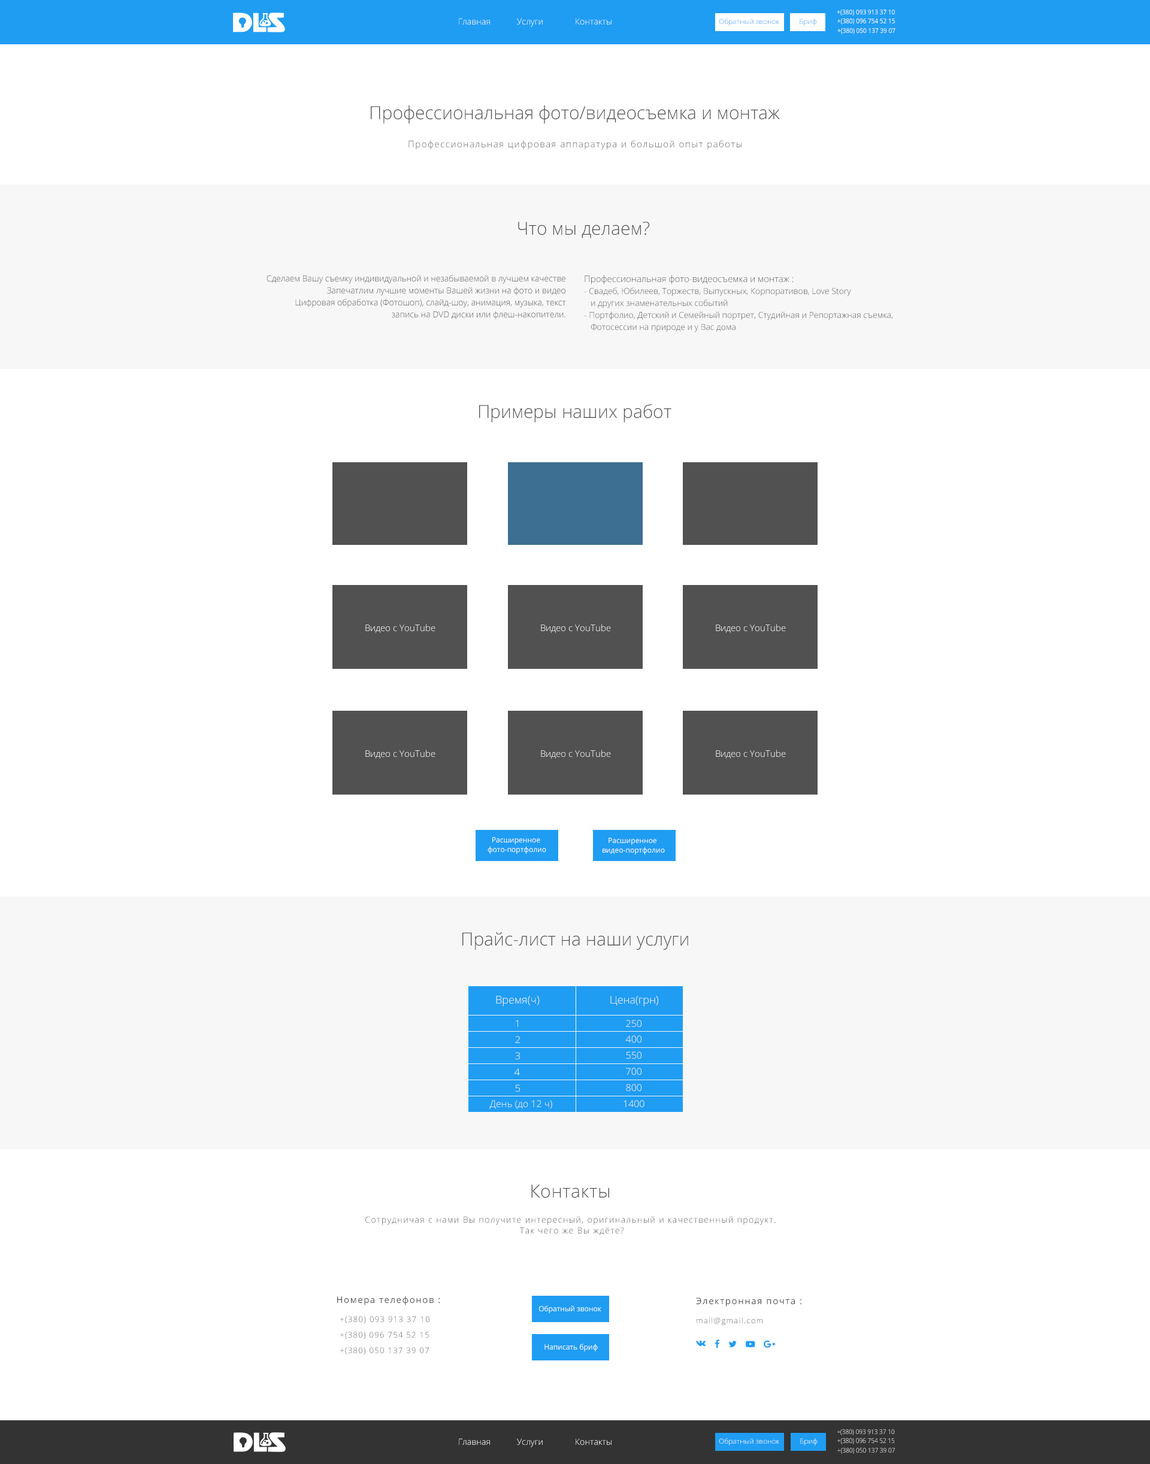
<style>
.page{position:relative;width:1150px;height:1464px;background:#ffffff}
.page>*{position:absolute;margin:0}
.t1{font:8.5px "OpenSans-Light";letter-spacing:0.005em;color:#ffffff}
.t2{font:8.5px "OpenSans-Light";letter-spacing:0.005em}
.t3{font:6.4px "OpenSans";color:#ffffff;scale:0.94 1}
.t4{font:6.7px "OpenSans";color:#ffffff;scale:0.9 1}
.t5{font:6.9px "OpenSans-Light";scale:1.05 1}
.t6{font:6.4px "OpenSans";scale:0.95 1}
.t7{font:18.1px "OpenSans-Light";color:#515151}
.t8{font:9px "OpenSans-Light";letter-spacing:0.1em;color:#515151}
.t9{font:18px "OpenSans-Light";color:#515151}
.t10{font:8.4px/12px "OpenSans-Light";color:#515151}
.t11{font:9px/12px "OpenSans-Light";color:#515151}
.t12{font:9px "OpenSans-Light";color:#ffffff}
.t13{font:7.3px/9.1px "OpenSans";color:#ffffff}
.t14{font:10.6px "OpenSans-Light";color:#f7f7f7}
.t15{font:9.4px "OpenSans-Light"}
.t16{font:9.4px "OpenSans-Light";color:#f7f7f7}
.t17{font:9.4px "OpenSans-Light";color:#f7f7f7;scale:1.08 1}
.t18{font:18px "OpenSans-Light";letter-spacing:0.02em;color:#515151}
.t19{font:8.5px/10.9px "OpenSans-Light";letter-spacing:0.1em;color:#515151}
.t20{font:9px "OpenSans";letter-spacing:0.1em;color:#515151}
.t21{font:9px/19.2px "OpenSans";letter-spacing:0.1em;color:#515151}
.t22{font:7.8px/19.2px "OpenSans-Light";letter-spacing:0.1em;color:#515151}
.t23{font:7.4px "OpenSans";color:#ffffff}
.t24{font:7.9px "OpenSans-Light";letter-spacing:0.1em}
.t25{font:6.4px "OpenSans-Light";scale:0.94 1}
.t26{font:6.9px "OpenSans-Light";color:#ffffff;scale:1.05 1}
.t27{font:6.7px "OpenSans-Light";scale:0.9 1}
.t28{font:6.4px "OpenSans-Light";scale:0.95 1}
</style>
<div class="page">
<p class="t1" style="left:459px;top:18px;width:31px;height:7px">Главная</p>
<p class="t2" style="left:517px;top:18px;width:26px;height:9px">Услуги</p>
<p class="t1" style="left:576px;top:18px;width:36px;height:7px">Контакты</p>
<p class="t3" style="left:837px;top:10px;width:58px;height:6px">+(380) 093 913 37 10</p>
<p class="t4" style="left:837px;top:18px;width:58px;height:7px">+(380) 096 754 52 15</p>
<p class="t5" style="left:719px;top:19px;width:60px;height:7px">Обратный звонок</p>
<p class="t5" style="left:800px;top:19px;width:17px;height:7px">Бриф</p>
<p class="t6" style="left:837px;top:28px;width:58px;height:6px">+(380) 050 137 39 07</p>
<p class="t7" style="left:371px;top:105px;width:409px;height:19px">Профессиональная фото/видеосъемка и монтаж</p>
<p class="t8" style="left:408px;top:140px;width:334px;height:10px">Профессиональная цифровая аппаратура и большой опыт работы</p>
<p class="t9" style="left:518px;top:222px;width:132px;height:16px">Что мы делаем?</p>
<p class="t10" style="left:267px;top:275px;width:299px;height:45px;text-align:right">Сделаем Вашу съемку индивидуальной и незабываемой в лучшем качестве<br>Запечатлим лучшие моменты Вашей жизни на фото и видео<br>Цифровая обработка (Фотошоп), слайд-шоу, анимация, музыка, текст<br> запись на DVD диски или флеш-накопители.</p>
<p class="t10" style="left:584px;top:275px;width:308px;height:57px"><span class="t11">Профессиональная фото-видеосъемка и монтаж : <br></span>- Свадеб, Юбилеев, Торжеств, Выпускных, Корпоративов, Love Story <br>   и других знаменательных событий<br>- Портфолио, Детский и Семейный портрет, Студийная и Репортажная съемка,<br>   Фотосессии на природе и у Вас дома</p>
<p class="t7" style="left:479px;top:404px;width:192px;height:19px">Примеры наших работ</p>
<p class="t12" style="left:365px;top:624px;width:70px;height:9px">Видео с YouTube</p>
<p class="t12" style="left:541px;top:624px;width:70px;height:9px">Видео с YouTube</p>
<p class="t12" style="left:716px;top:624px;width:70px;height:9px">Видео с YouTube</p>
<p class="t12" style="left:365px;top:750px;width:70px;height:9px">Видео с YouTube</p>
<p class="t12" style="left:541px;top:750px;width:70px;height:9px">Видео с YouTube</p>
<p class="t12" style="left:716px;top:750px;width:70px;height:9px">Видео с YouTube</p>
<p class="t13" style="left:488px;top:837px;width:58px;height:17px;text-align:center">Расширенное <br>фото-портфолио</p>
<p class="t13" style="left:603px;top:838px;width:62px;height:17px;text-align:center">Расширенное <br>видео-портфолио</p>
<p class="t7" style="left:462px;top:932px;width:226px;height:19px">Прайс-лист на наши услуги</p>
<p class="t14" style="left:496px;top:996px;width:44px;height:11px">Время(ч)</p>
<p class="t14" style="left:610px;top:996px;width:48px;height:11px">Цена(грн)</p>
<p class="t15" style="left:516px;top:1020px;width:2px;height:7px">1</p>
<p class="t16" style="left:626px;top:1020px;width:15px;height:8px">250</p>
<p class="t17" style="left:515px;top:1036px;width:5px;height:7px">2</p>
<p class="t16" style="left:625px;top:1036px;width:16px;height:7px">400</p>
<p class="t17" style="left:515px;top:1052px;width:5px;height:8px">3</p>
<p class="t16" style="left:626px;top:1052px;width:15px;height:8px">550</p>
<p class="t17" style="left:514px;top:1069px;width:6px;height:7px">4</p>
<p class="t16" style="left:626px;top:1068px;width:15px;height:8px">700</p>
<p class="t17" style="left:515px;top:1085px;width:5px;height:7px">5</p>
<p class="t16" style="left:626px;top:1084px;width:15px;height:8px">800</p>
<p class="t16" style="left:489px;top:1100px;width:63px;height:9px">День (до 12 ч)</p>
<p class="t15" style="left:624px;top:1100px;width:20px;height:8px">1400</p>
<p class="t18" style="left:531px;top:1185px;width:78px;height:14px">Контакты</p>
<p class="t19" style="left:365px;top:1216px;width:411px;height:20px;text-align:center">Сотрудничая с нами Вы получите интересный, оригинальный и качественный продукт.<br> Так чего же Вы ждёте?</p>
<p class="t20" style="left:337px;top:1296px;width:103px;height:10px">Номера телефонов :</p>
<p class="t21" style="left:696px;top:1298px;width:105px;height:27px">Электронная почта : <br><span class="t22">mail@gmail.com</span></p>
<p class="t23" style="left:539px;top:1306px;width:62px;height:8px">Обратный звонок</p>
<p class="t24" style="left:340px;top:1317px;width:89px;height:7px">+(380) 093 913 37 10</p>
<p class="t24" style="left:340px;top:1332px;width:89px;height:7px">+(380) 096 754 52 15</p>
<p class="t24" style="left:340px;top:1348px;width:89px;height:7px">+(380) 050 137 39 07</p>
<p class="t23" style="left:544px;top:1344px;width:54px;height:8px">Написать бриф</p>
<p class="t25" style="left:837px;top:1430px;width:58px;height:6px">+(380) 093 913 37 10</p>
<p class="t1" style="left:459px;top:1439px;width:31px;height:7px">Главная</p>
<p class="t2" style="left:517px;top:1439px;width:26px;height:9px">Услуги</p>
<p class="t1" style="left:576px;top:1439px;width:36px;height:7px">Контакты</p>
<p class="t26" style="left:719px;top:1439px;width:60px;height:7px">Обратный звонок</p>
<p class="t5" style="left:800px;top:1439px;width:18px;height:7px">Бриф</p>
<p class="t27" style="left:837px;top:1438px;width:57px;height:7px">+(380) 096 754 52 15</p>
<p class="t28" style="left:837px;top:1448px;width:58px;height:6px">+(380) 050 137 39 07</p>
</div>
